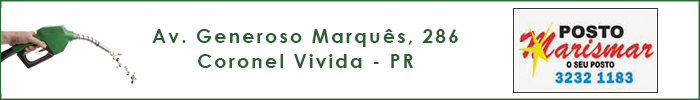
<style>
.page{position:relative;width:700px;height:100px;background:#ffffff}
.page>*{position:absolute;margin:0}
.t1{font:19.4px/25.4px "CenturyGothic-Bold";letter-spacing:0.1em;color:#29612f}
</style>
<div class="page">
<p class="t1" style="left:152px;top:29px;width:306px;height:39px;text-align:center">Av. Generoso Marquês, 286<br>Coronel Vivida - PR</p>
</div>
